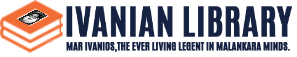
<style>
.page{position:relative;width:297px;height:57px;background:#ffffff}
.page>*{position:absolute;margin:0}
.t1{font:9.2px "Antonio-Bold";color:#162242;font-weight:bold;scale:1.04 1}
</style>
<div class="page">
<p class="t1" style="left:66px;top:42px;width:224px;height:10px">MAR IVANIOS,THE EVER LIVING LEGENT IN MALANKARA MINDS.</p>
</div>
